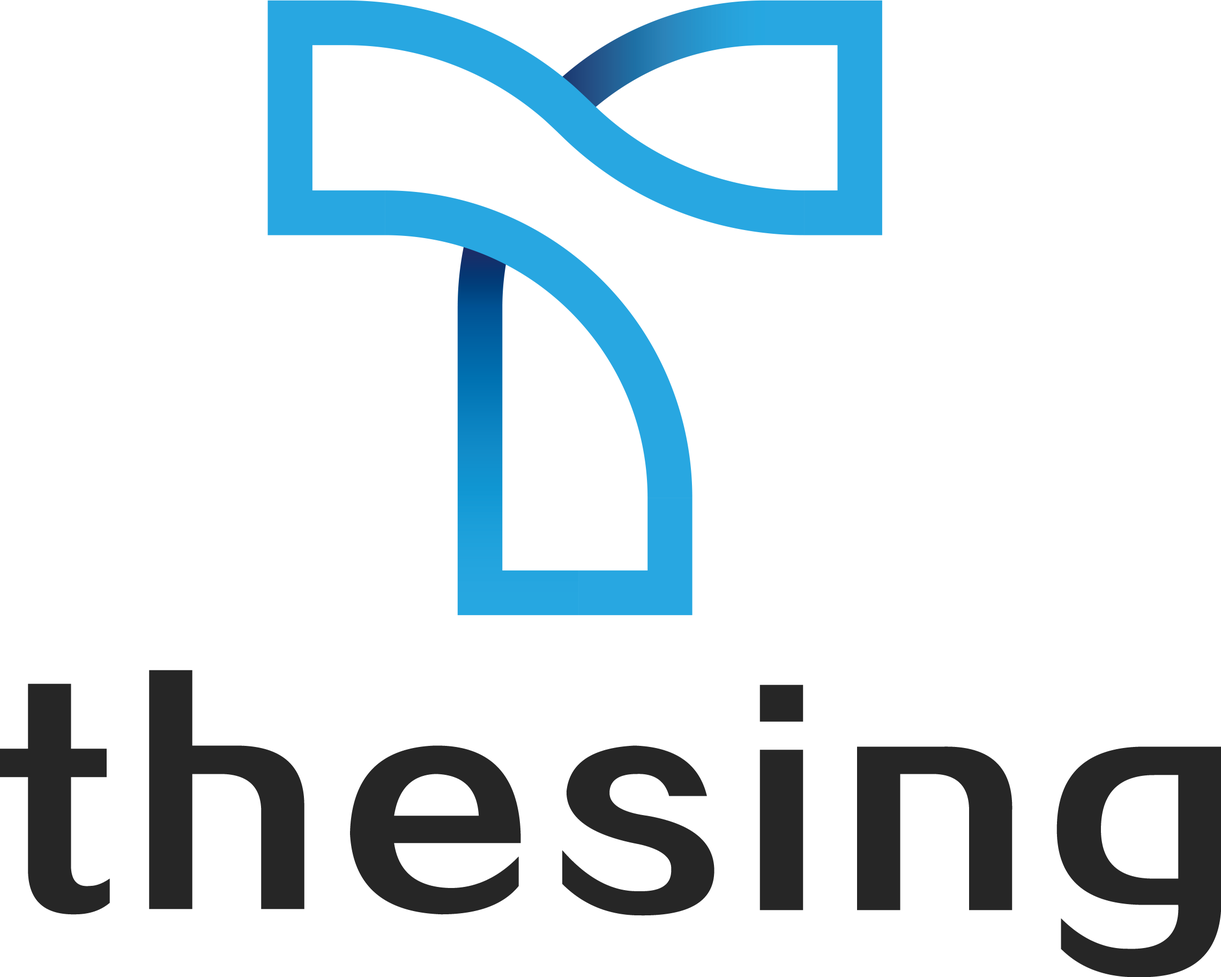
<style>
.page{position:relative;width:1221px;height:977px;background:#ffffff}
.page>*{position:absolute;margin:0}
.t1{font:268px "FZZCHJW--GB1-0";letter-spacing:0.05em;color:#262626}
</style>
<div class="page">
<p class="t1" style="left:0px;top:669px;width:1222px;height:308px">thesing</p>
</div>
